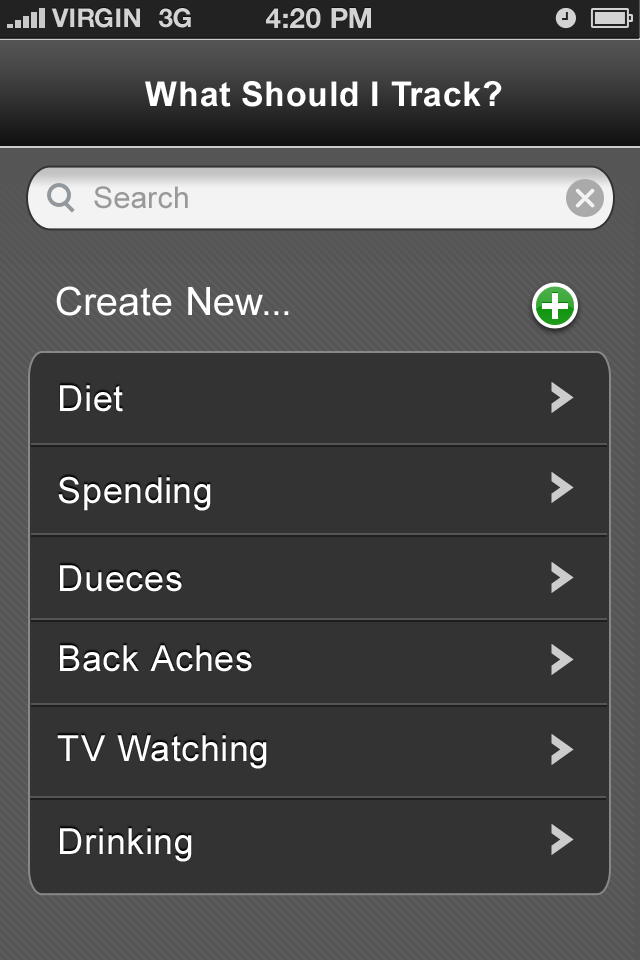
<style>
.page{position:relative;width:640px;height:960px;background:#333333}
.page>*{position:absolute;margin:0}
.t1{font:26px "HelveticaNeue-Bold";color:#d3d3d3;text-transform:uppercase}
.t2{font:28px "HelveticaNeue-Bold";color:#d3d3d3;text-transform:uppercase}
.t3{font:34px "Arial-BoldMT";letter-spacing:0.02em;color:#ffffff}
.t4{font:30px "ArialMT";letter-spacing:0.02em;color:#999999}
.t5{font:39px "ArialMT";letter-spacing:0.02em;color:#ffffff}
.t6{font:36px "ArialMT";letter-spacing:0.02em;color:#ffffff}
</style>
<div class="page">
<p class="t1" style="left:51px;top:8px;width:89px;height:20px">VIRGIN</p>
<p class="t1" style="left:159px;top:8px;width:32px;height:20px">3G</p>
<p class="t2" style="left:266px;top:8px;width:105px;height:21px">4:20 pM</p>
<p class="t3" style="left:145px;top:81px;width:357px;height:26px">What Should I Track?</p>
<p class="t4" style="left:94px;top:186px;width:94px;height:23px">Search</p>
<p class="t5" style="left:56px;top:286px;width:233px;height:30px">Create New...</p>
<p class="t6" style="left:60px;top:385px;width:63px;height:27px">Diet</p>
<p class="t6" style="left:58px;top:476px;width:153px;height:35px">Spending</p>
<p class="t6" style="left:60px;top:565px;width:122px;height:27px">Dueces</p>
<p class="t6" style="left:60px;top:645px;width:192px;height:27px">Back Aches</p>
<p class="t6" style="left:57px;top:735px;width:210px;height:34px">TV Watching</p>
<p class="t6" style="left:60px;top:828px;width:132px;height:34px">Drinking</p>
</div>
